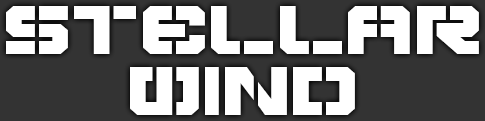
<style>
.page{position:relative;width:485px;height:121px;background:#333333}
.page>*{position:absolute;margin:0}
.t1{font:68px/61px "VyperBoldExpanded";color:#ffffff}
</style>
<div class="page">
<p class="t1" style="left:6px;top:6px;width:473px;height:109px;text-align:center">Stellar <br>Wind</p>
</div>
